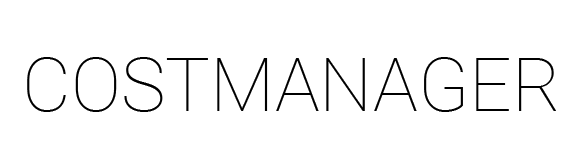
<style>
.page{position:relative;width:573px;height:168px;background:#ffffff}
.page>*{position:absolute;margin:0}
.t1{font:75px "Roboto-Thin";color:#000000}
</style>
<div class="page">
<p class="t1" style="left:27px;top:57px;width:529px;height:55px">COSTMANAGER</p>
</div>
